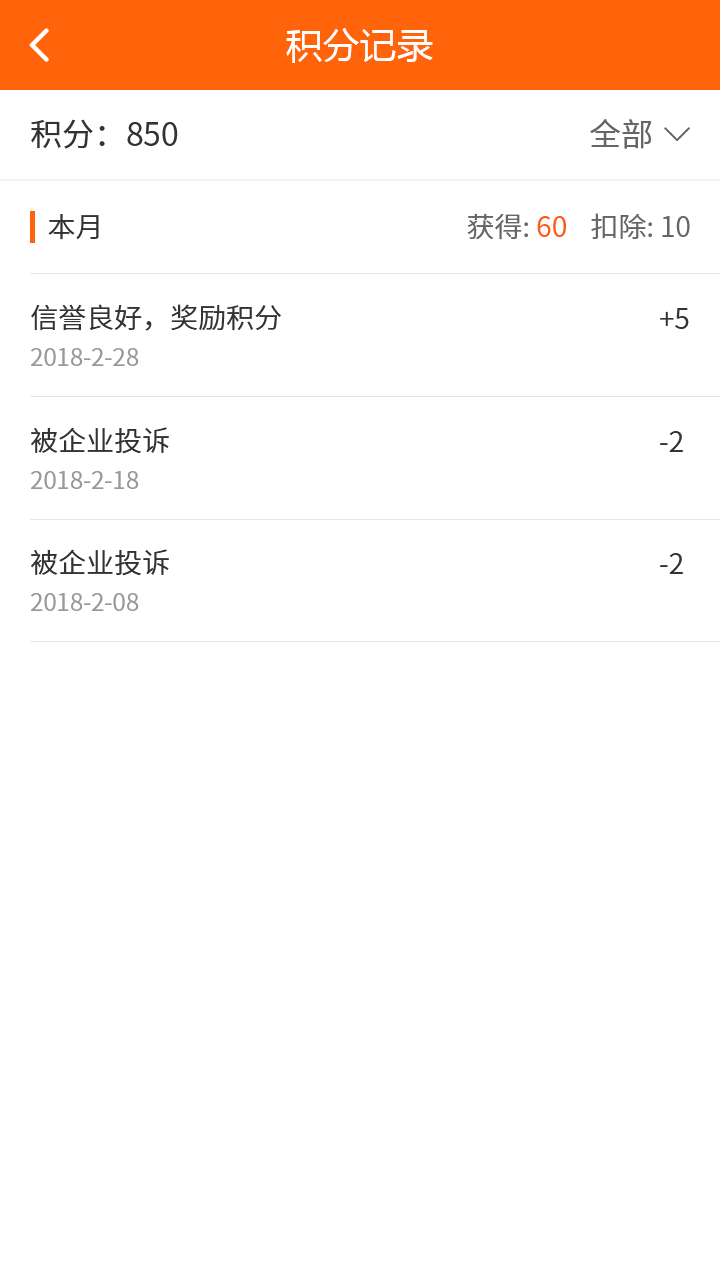
<style>
.page{position:relative;width:720px;height:1280px;background:#ffffff}
.page>*{position:absolute;margin:0}
.t1{font:36px "MicrosoftYaHei";letter-spacing:0.03em;color:#ffffff}
.t2{font:32px "NotoSansCJKsc-Regular";color:#333333;font-variant:small-caps}
.t3{font:32px "NotoSansCJKsc-Regular";color:#666666;font-variant:small-caps}
.t4{font:28px "NotoSansCJKsc-DemiLight";color:#333333}
.t5{font:28px "NotoSansCJKsc-DemiLight";color:#666666}
.t6{font:28px "NotoSansCJKsc-Regular";color:#fb5d15}
.t7{font:24px "NotoSansCJKsc-DemiLight";color:#999999}
</style>
<div class="page">
<p class="t1" style="left:286px;top:28px;width:147px;height:35px">积分记录</p>
<p class="t2" style="left:31px;top:119px;width:147px;height:30px">积分：850</p>
<p class="t3" style="left:590px;top:119px;width:62px;height:30px">全部</p>
<p class="t4" style="left:48px;top:214px;width:51px;height:26px">本月</p>
<p class="t5" style="left:467px;top:213px;width:99px;height:27px">获得: <span class="t6">60</span></p>
<p class="t5" style="left:591px;top:213px;width:99px;height:26px">扣除: 10</p>
<p class="t4" style="left:31px;top:304px;width:251px;height:27px">信誉良好，奖励积分</p>
<p class="t4" style="left:660px;top:308px;width:29px;height:21px">+5</p>
<p class="t7" style="left:31px;top:348px;width:108px;height:18px">2018-2-28</p>
<p class="t4" style="left:31px;top:427px;width:138px;height:27px">被企业投诉</p>
<p class="t4" style="left:660px;top:431px;width:23px;height:21px">-2</p>
<p class="t7" style="left:31px;top:471px;width:108px;height:18px">2018-2-18</p>
<p class="t4" style="left:31px;top:549px;width:138px;height:27px">被企业投诉</p>
<p class="t4" style="left:660px;top:553px;width:23px;height:21px">-2</p>
<p class="t7" style="left:31px;top:593px;width:108px;height:18px">2018-2-08</p>
</div>
